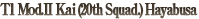
<style>
.page{position:relative;width:199px;height:19px;background:#ffffff}
.page>*{position:absolute;margin:0}
.t1{font:16px "RyuminPro-ExBold";letter-spacing:-0.11em;color:#4a3f32;font-weight:bold;scale:0.8 1}
</style>
<div class="page">
<p class="t1" style="left:0px;top:2px;width:198px;height:17px">T1 Mod.II Kai (20th Squad.) Hayabusa</p>
</div>
